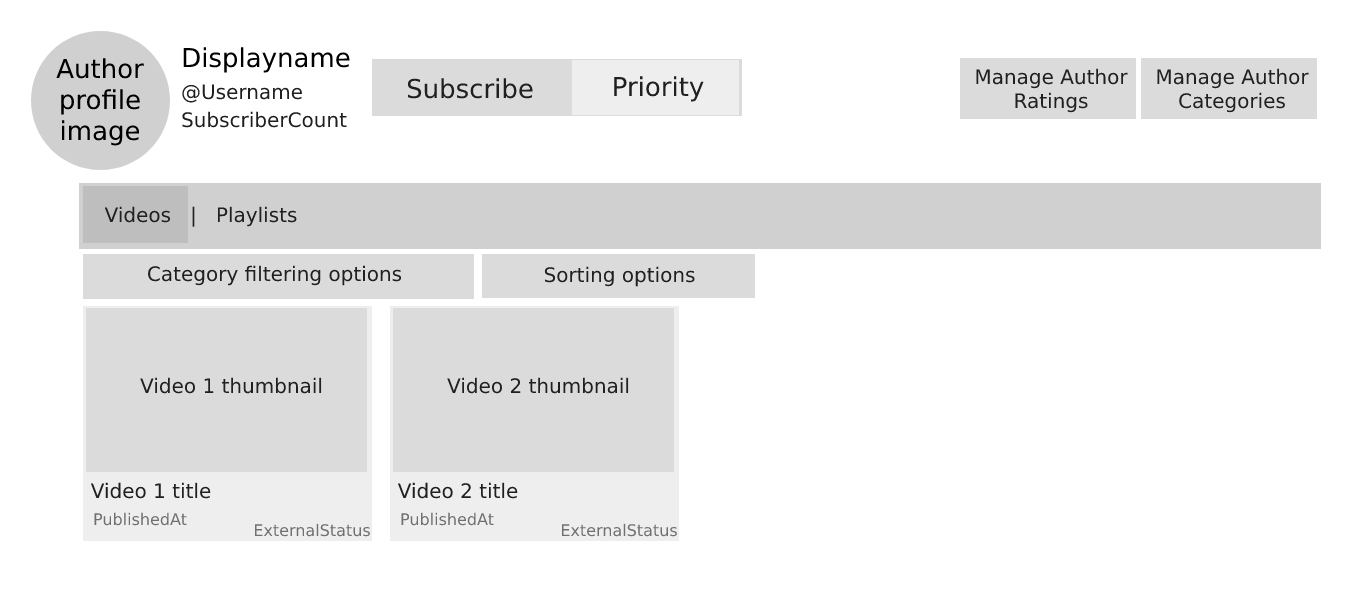
<style>
.page{position:relative;width:1350px;height:600px;background:#ffffff}
.page>*{position:absolute;margin:0}
.t1{font:26px "DejaVuSans";color:#000000}
.t2{font:26px "DejaVuSans";color:#202020}
.t3{font:20px "DejaVuSans";color:#202020}
.t4{font:16px "DejaVuSans";color:#707070}
</style>
<div class="page">
<p class="t1" style="left:183px;top:47px;width:167px;height:26px">Displayname</p>
<p class="t1" style="left:56px;top:58px;width:88px;height:88px;text-align:center">Author<br>profile<br>image</p>
<p class="t2" style="left:407px;top:78px;width:126px;height:21px">Subscribe</p>
<p class="t2" style="left:614px;top:76px;width:90px;height:26px">Priority</p>
<p class="t3" style="left:976px;top:68px;width:152px;height:45px;text-align:center">Manage Author<br>Ratings</p>
<p class="t3" style="left:1157px;top:68px;width:152px;height:45px;text-align:center">Manage Author<br>Categories</p>
<p class="t3" style="left:182px;top:84px;width:120px;height:19px">@Username</p>
<p class="t3" style="left:182px;top:111px;width:165px;height:17px">SubscriberCount</p>
<p class="t3" style="left:104px;top:206px;width:193px;height:21px">Videos   |   Playlists</p>
<p class="t3" style="left:148px;top:265px;width:254px;height:21px">Category filtering options</p>
<p class="t3" style="left:544px;top:266px;width:151px;height:21px">Sorting options</p>
<p class="t3" style="left:140px;top:377px;width:182px;height:17px">Video 1 thumbnail</p>
<p class="t3" style="left:447px;top:377px;width:182px;height:17px">Video 2 thumbnail</p>
<p class="t3" style="left:90px;top:482px;width:121px;height:17px">Video 1 title</p>
<p class="t3" style="left:397px;top:482px;width:121px;height:17px">Video 2 title</p>
<p class="t4" style="left:94px;top:512px;width:93px;height:14px">PublishedAt</p>
<p class="t4" style="left:401px;top:512px;width:93px;height:14px">PublishedAt</p>
<p class="t4" style="left:254px;top:523px;width:116px;height:14px">ExternalStatus</p>
<p class="t4" style="left:561px;top:523px;width:116px;height:14px">ExternalStatus</p>
</div>
